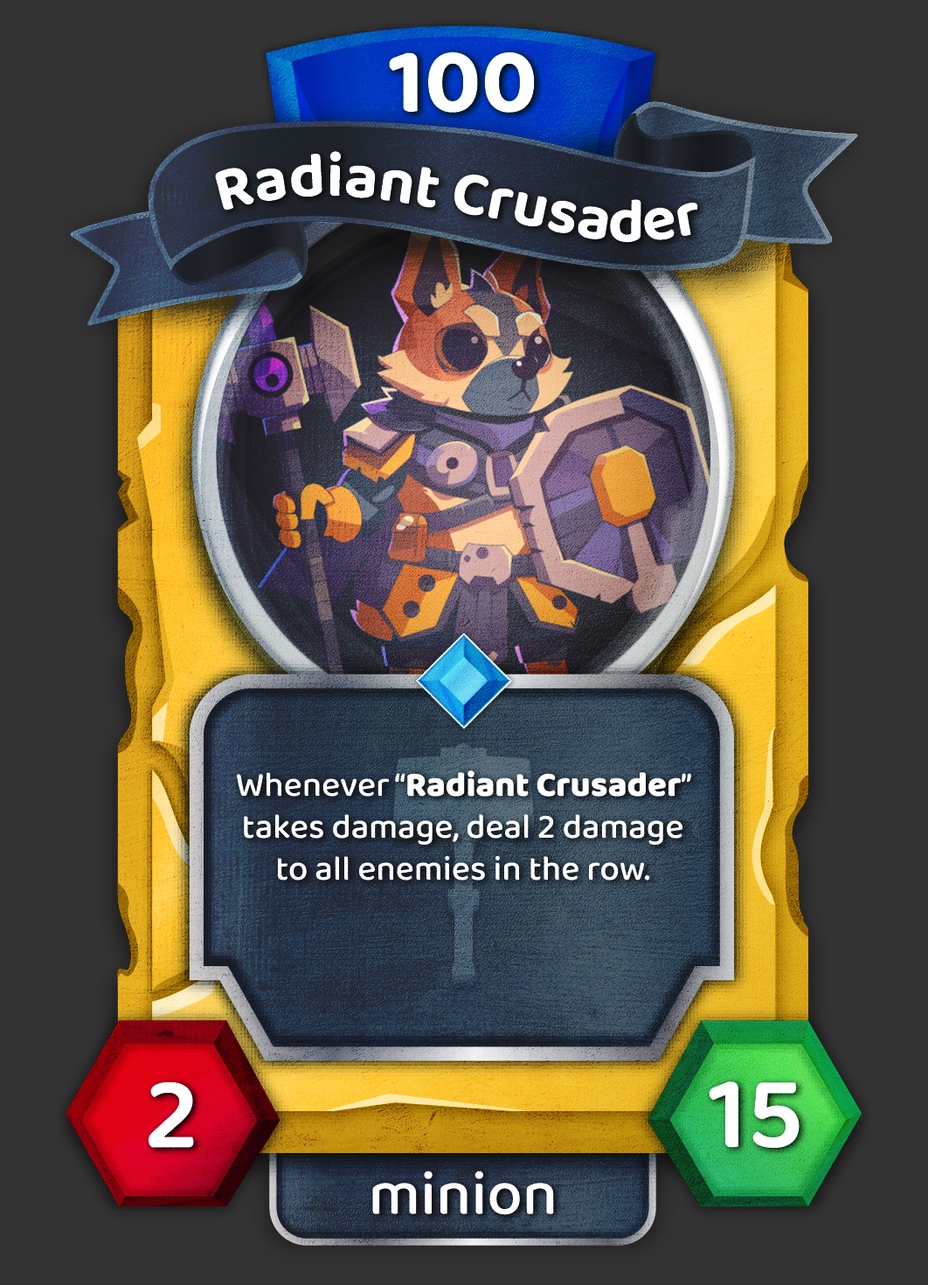
<style>
.page{position:relative;width:928px;height:1285px;background:#333333}
.page>*{position:absolute;margin:0}
.t1{font:94.4px "BalooChettan2-Bold";color:#ffffff}
.t2{font:62.9px "BalooChettan2-Bold";color:#ffffff}
.t3{font:34.9px "BalooChettan2-Medium";color:#ffffff}
.t4{font:34.9px "BalooChettan2-ExtraBold";color:#ffffff}
.t5{font:104.8px "BalooChettan2-SemiBold";color:#ffffff}
.t6{font:62.9px "BalooChettan2-Medium";color:#ffffff}
</style>
<div class="page">
<p class="t1" style="left:389px;top:52px;width:146px;height:61px">100</p>
<p class="t2" style="left:215px;top:151px;width:483px;height:92px">Radiant Crusader</p>
<p class="t3" style="left:236px;top:771px;width:455px;height:110px;text-align:center">Whenever “<span class="t4">Radiant Crusader</span>” takes damage, deal 2 damage to all enemies in the row.</p>
<p class="t5" style="left:149px;top:1082px;width:45px;height:66px">2</p>
<p class="t5" style="left:709px;top:1082px;width:90px;height:66px">15</p>
<p class="t6" style="left:372px;top:1171px;width:182px;height:44px">minion</p>
</div>
